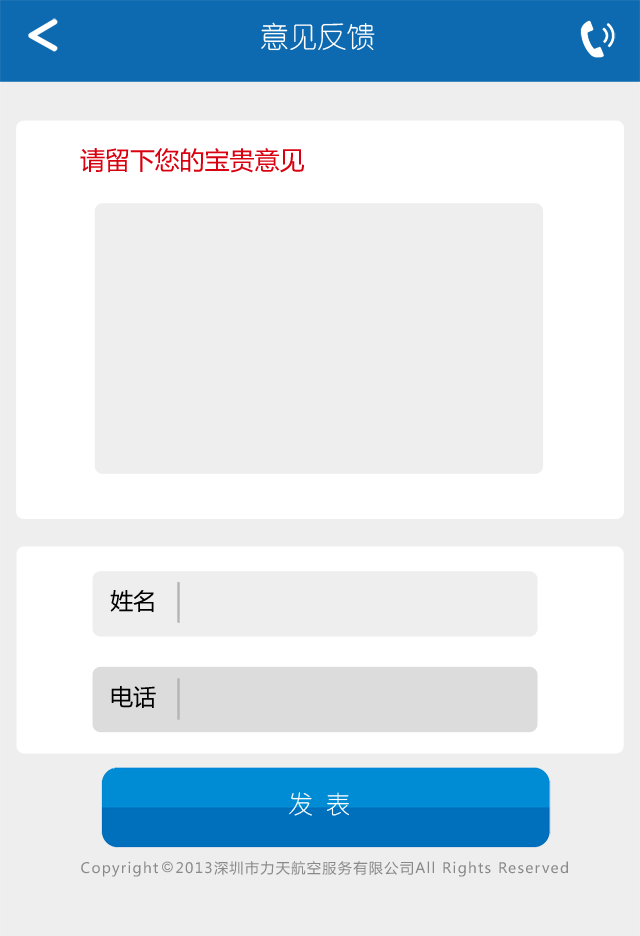
<style>
.page{position:relative;width:640px;height:936px;background:#eeeeee}
.page>*{position:absolute;margin:0}
.t1{font:28.8px "YouYuan";color:#ffffff}
.t2{font:25px "MicrosoftYaHei";color:#d9000f}
.t3{font:23px "MicrosoftYaHei";color:#000000}
.t4{font:25px "YouYuan";color:#ffffff}
.t5{font:14.2px "MicrosoftYaHei";letter-spacing:0.09em;color:#898989}
</style>
<div class="page">
<p class="t1" style="left:261px;top:22px;width:114px;height:29px">意见反馈</p>
<p class="t2" style="left:80px;top:148px;width:224px;height:25px">请留下您的宝贵意见</p>
<p class="t3" style="left:110px;top:590px;width:44px;height:22px">姓名</p>
<p class="t3" style="left:111px;top:686px;width:45px;height:22px">电话</p>
<p class="t4" style="left:289px;top:792px;width:60px;height:24px">发 表</p>
<p class="t5" style="left:81px;top:861px;width:77px;height:16px">Copyright</p>
<p class="t5" style="left:176px;top:861px;width:392px;height:16px">2013深圳市力天航空服务有限公司All Rights Reserved</p>
</div>
